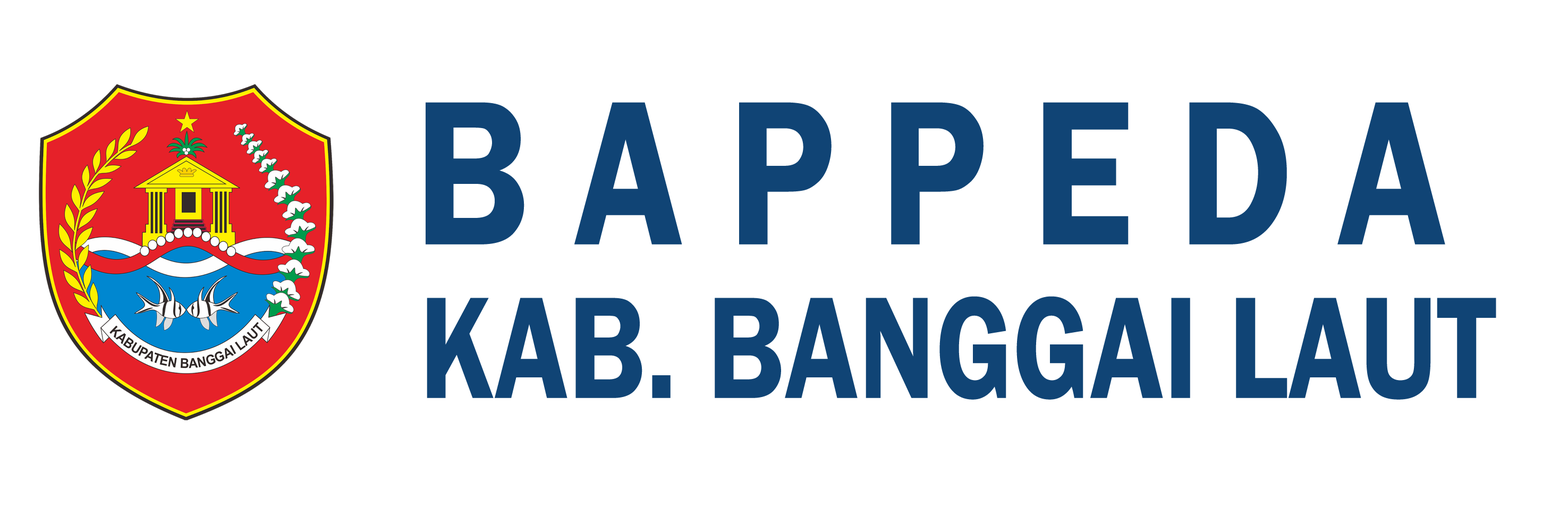
<style>
.page{position:relative;width:1568px;height:506px;background:#ffffff}
.page>*{position:absolute;margin:0}
.t1{font:212.7px "FranklinGothic-Demi";color:#104475;scale:0.84 1}
.t2{font:149.9px "FranklinGothic-Demi";color:#104475;scale:0.8 1}
</style>
<div class="page">
<p class="t1" style="left:426px;top:102px;width:1019px;height:142px">B A P P E D A</p>
<p class="t2" style="left:427px;top:296px;width:1069px;height:104px">KAB. BANGGAI LAUT</p>
</div>
